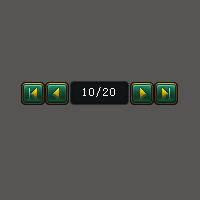
<style>
.page{position:relative;width:200px;height:200px;background:#575454}
.page>*{position:absolute;margin:0}
.t1{font:12px "SimSun";letter-spacing:0.08em;color:#ffffff}
</style>
<div class="page">
<p class="t1" style="left:83px;top:87px;width:32px;height:10px">10/20</p>
</div>
